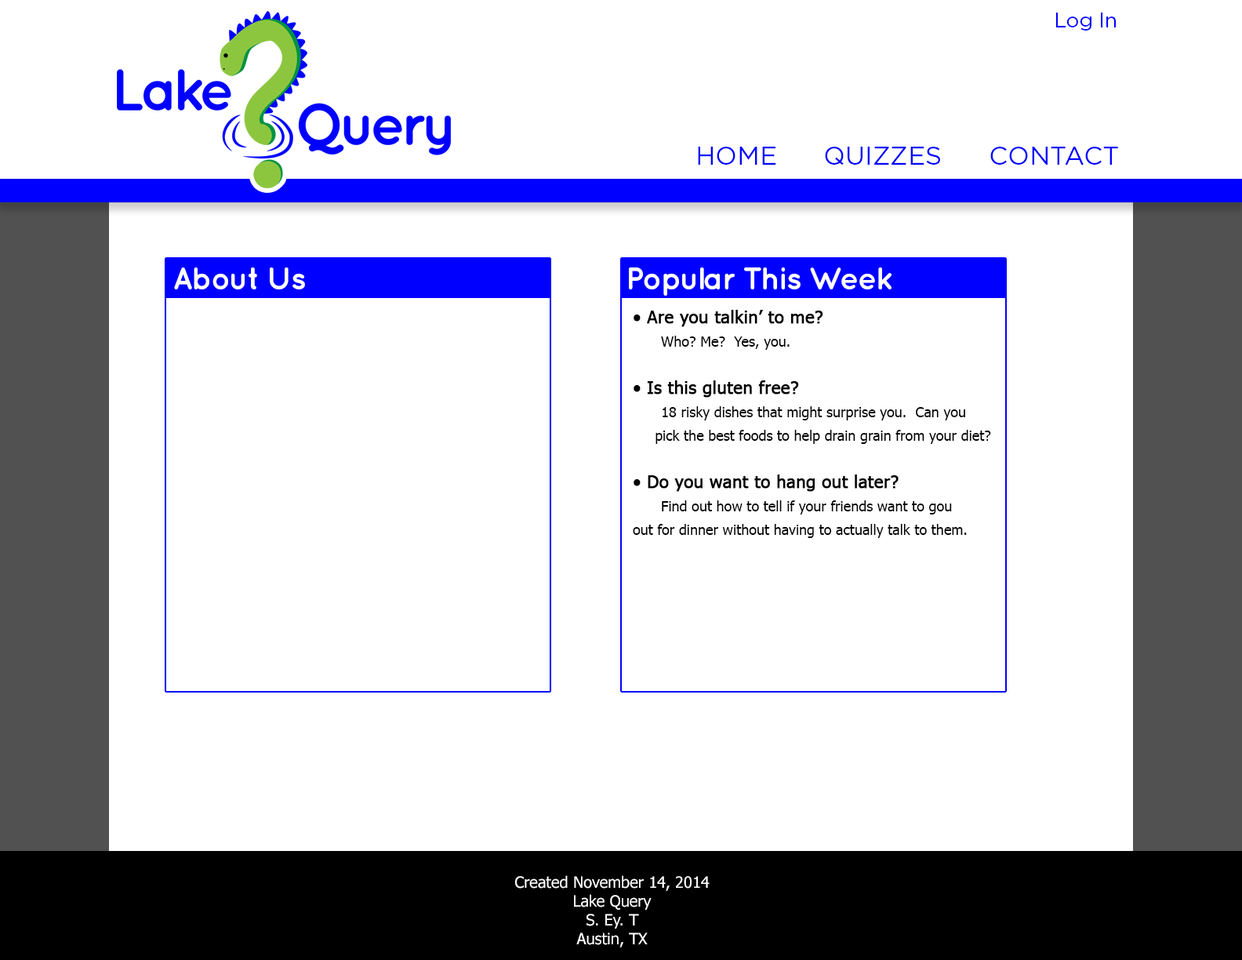
<style>
.page{position:relative;width:1242px;height:960px;background:#ffffff}
.page>*{position:absolute;margin:0}
.t1{font:20.4px "Gotham-Book";color:#0000ff}
.t2{font:25.9px "Gotham-Book";color:#0000ff}
.t3{font:31.4px "QuicksandBold-Regular";letter-spacing:-0.04em;color:#ffffff}
.t4{font:14.1px/23.5px "Tahoma";color:#000000}
.t5{font:17.3px/23.5px "Tahoma";color:#000000;font-weight:bold}
.t6{font:15.7px "Tahoma";color:#ffffff}
</style>
<div class="page">
<p class="t1" style="left:1056px;top:13px;width:60px;height:18px">Log In</p>
<p class="t2" style="left:698px;top:147px;width:420px;height:18px">HOME      QUIZZES      CONTACT</p>
<p class="t3" style="left:174px;top:267px;width:131px;height:22px">About Us</p>
<p class="t3" style="left:629px;top:267px;width:263px;height:29px">Popular This Week</p>
<p class="t4" style="left:633px;top:310px;width:358px;height:228px"><span class="t5">• Are you talkin’ to me?<br></span>    Who? Me?  Yes, you.<br><br><span class="t5">• Is this gluten free?<br>  </span>    18 risky dishes that might surprise you.  Can you<br>     pick the best foods to help drain grain from your diet?<br><br><span class="t5">• Do you want to hang out later?<br></span> Find out how to tell if your friends want to gou<br>out for dinner without having to actually talk to them.</p>
<p class="t6" style="left:515px;top:875px;width:195px;height:72px;text-align:center">Created November 14, 2014<br>Lake Query<br>S. Ey. T<br>Austin, TX</p>
</div>
